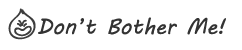
<style>
.page{position:relative;width:242px;height:50px;background:#ffffff}
.page>*{position:absolute;margin:0}
.t1{font:22px "MVBoli";color:#333333}
</style>
<div class="page">
<p class="t1" style="left:38px;top:17px;width:188px;height:18px">Don’t Bother Me!</p>
</div>
